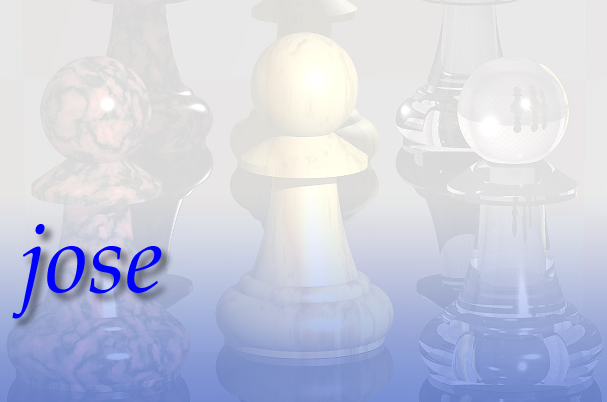
<style>
.page{position:relative;width:607px;height:402px}
.page>*{position:absolute;margin:0}
.t1{font:96px "PalatinoLinotype-Italic";color:#0000ff}
</style>
<div class="page">
<p class="t1" style="left:12px;top:224px;width:150px;height:95px">jose</p>
</div>
